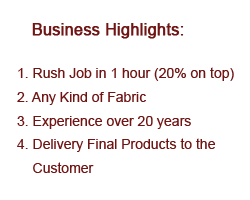
<style>
.page{position:relative;width:250px;height:200px;background:#ffffff}
.page>*{position:absolute;margin:0}
.t1{font:13.9px/23.9px "ArialMT";color:#701514}
.t2{font:15.9px "ArialMT";color:#701514;font-weight:bold}
.t3{font:13.9px "ArialMT";color:#701514}
</style>
<div class="page">
<p class="t1" style="left:17px;top:23px;width:217px;height:150px"><span class="t2">   Business Highlights:<br><br></span><span class="t3">1. </span>Rush Job in 1 hour (20% on top)<br>2. Any Kind of Fabric<br>3. Experience over 20 years<br>4. Delivery Final Products to the<br>    Customer</p>
</div>
